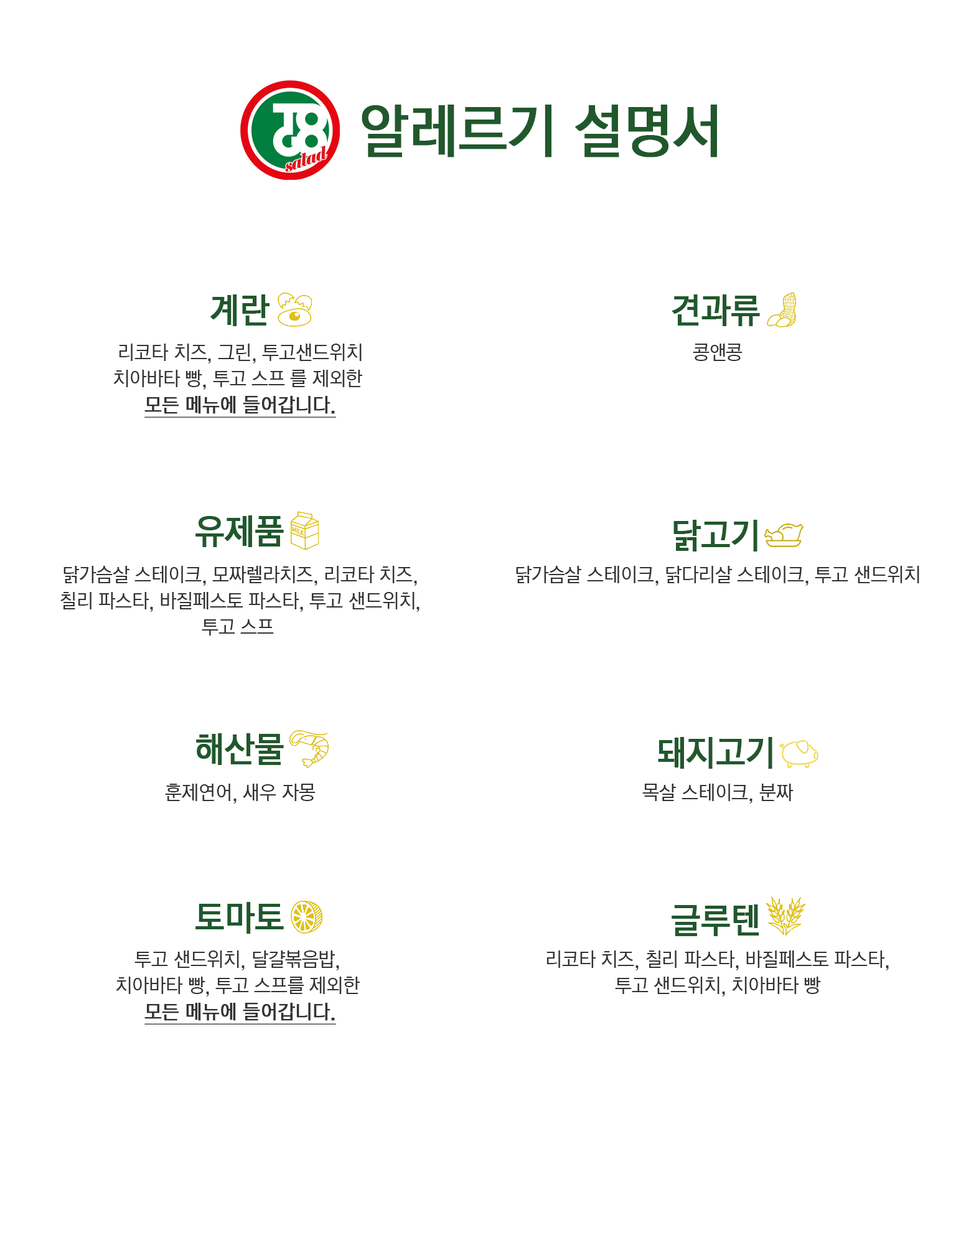
<style>
.page{position:relative;width:956px;height:1248px;background:#ffffff}
.page>*{position:absolute;margin:0}
.t1{font:62.2px "LGPC";color:#20582c;font-weight:bold}
.t2{font:37.3px "LGPC";color:#20582c;font-weight:bold}
.t3{font:21.8px "LGPC";color:#333333}
.t4{font:21.8px "LGPC";color:#333333;font-weight:bold;text-decoration:underline}
</style>
<div class="page">
<p class="t1" style="left:362px;top:105px;width:355px;height:52px">알레르기 설명서</p>
<p class="t2" style="left:210px;top:294px;width:59px;height:32px">계란</p>
<p class="t2" style="left:671px;top:294px;width:89px;height:32px">견과류</p>
<p class="t3" style="left:113px;top:343px;width:249px;height:75px;text-align:center">리코타 치즈, 그린, 투고샌드위치<br>치아바타 빵, 투고 스프 를 제외한 <br><span class="t4">모든 메뉴에 들어갑니다.</span></p>
<p class="t3" style="left:693px;top:343px;width:49px;height:18px">콩앤콩</p>
<p class="t2" style="left:195px;top:515px;width:89px;height:32px">유제품</p>
<p class="t2" style="left:673px;top:520px;width:84px;height:31px">닭고기</p>
<p class="t3" style="left:60px;top:566px;width:359px;height:69px;text-align:center">닭가슴살 스테이크, 모짜렐라치즈, 리코타 치즈,<br>칠리 파스타, 바질페스토 파스타, 투고 샌드위치,<br>투고 스프</p>
<p class="t3" style="left:516px;top:566px;width:403px;height:20px">닭가슴살 스테이크, 닭다리살 스테이크, 투고 샌드위치</p>
<p class="t2" style="left:196px;top:733px;width:88px;height:32px">해산물</p>
<p class="t2" style="left:658px;top:737px;width:114px;height:31px">돼지고기</p>
<p class="t3" style="left:165px;top:783px;width:150px;height:20px">훈제연어, 새우 자몽</p>
<p class="t3" style="left:642px;top:783px;width:151px;height:20px">목살 스테이크, 분짜</p>
<p class="t2" style="left:195px;top:902px;width:89px;height:31px">토마토</p>
<p class="t2" style="left:671px;top:904px;width:88px;height:32px">글루텐</p>
<p class="t3" style="left:116px;top:950px;width:244px;height:74px;text-align:center">투고 샌드위치, 달걀볶음밥, <br>치아바타 빵, 투고 스프를 제외한 <br><span class="t4">모든 메뉴에 들어갑니다.</span></p>
<p class="t3" style="left:546px;top:950px;width:343px;height:46px;text-align:center">리코타 치즈, 칠리 파스타, 바질페스토 파스타,<br>투고 샌드위치, 치아바타 빵</p>
</div>
